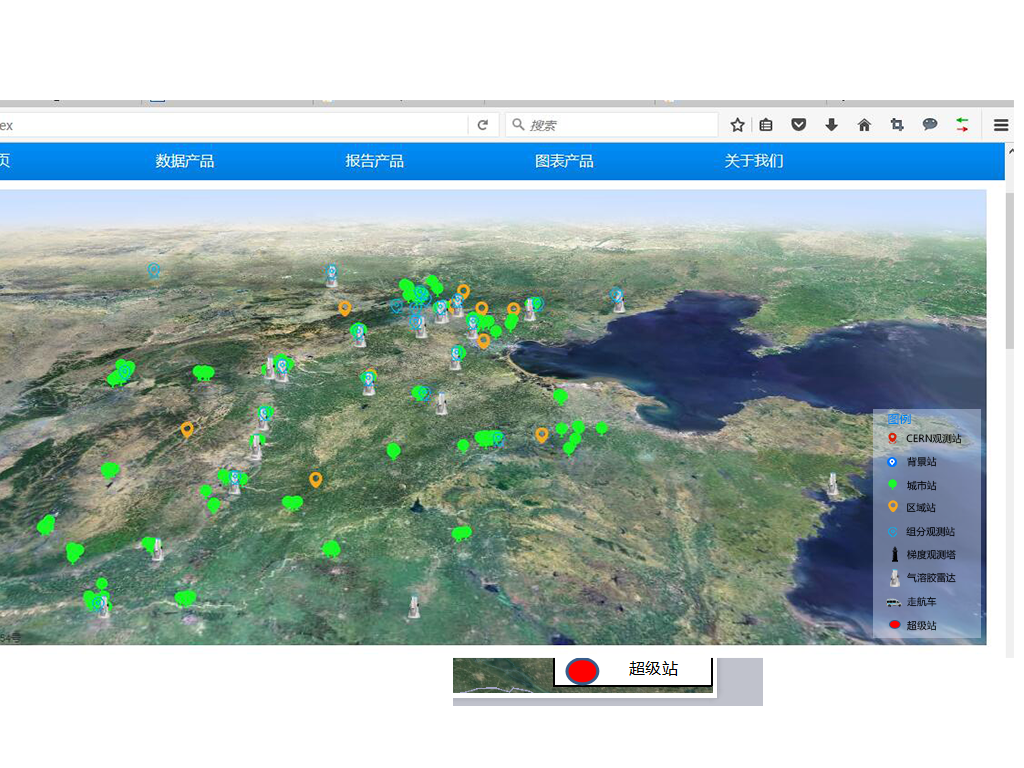
<style>
.page{position:relative;width:1024px;height:768px;background:#ffffff}
.page>*{position:absolute;margin:0}
.t1{font:11.5px "MicrosoftYaHei";color:#0086ef}
.t2{font:9.7px "MicrosoftYaHei";color:#000000}
.t3{font:9.7px "MicrosoftYaHei"}
</style>
<div class="page">
<p class="t1" style="left:888px;top:413px;width:23px;height:12px">图例</p>
<p class="t2" style="left:906px;top:433px;width:56px;height:11px">CERN观测站</p>
<p class="t3" style="left:907px;top:456px;width:30px;height:11px">背景站</p>
<p class="t3" style="left:907px;top:480px;width:30px;height:11px">城市站</p>
<p class="t3" style="left:907px;top:502px;width:29px;height:11px">区域站</p>
<p class="t3" style="left:906px;top:526px;width:49px;height:11px">组分观测站</p>
<p class="t3" style="left:907px;top:549px;width:49px;height:11px">梯度观测塔</p>
<p class="t2" style="left:907px;top:572px;width:49px;height:11px">气溶胶雷达</p>
<p class="t3" style="left:907px;top:596px;width:30px;height:11px">走航车</p>
<p class="t3" style="left:907px;top:620px;width:30px;height:11px">超级站</p>
</div>
